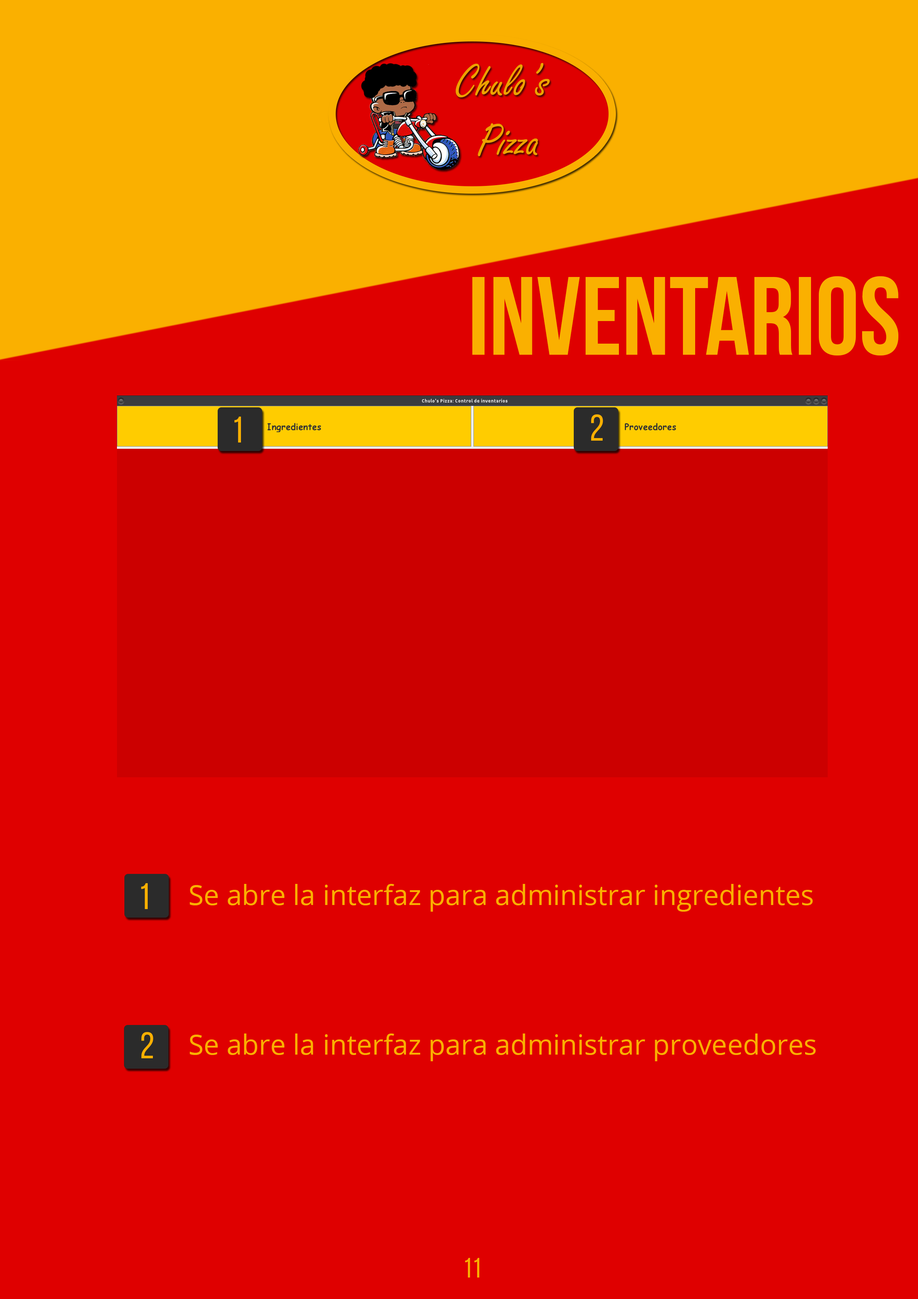
<style>
.page{position:relative;width:918px;height:1299px;background:#df0000}
.page>*{position:absolute;margin:0}
.t1{font:111.1px "BebasNeueBold";color:#fab000}
.t2{font:37px "BebasNeueRegular";color:#fab000}
.t3{font:27.8px "OpenSans";color:#fab000}
.t4{font:27.8px "BebasNeueRegular";color:#fab000}
</style>
<div class="page">
<p class="t1" style="left:472px;top:276px;width:427px;height:79px">Inventarios</p>
<p class="t2" style="left:234px;top:416px;width:7px;height:26px">1</p>
<p class="t2" style="left:591px;top:414px;width:12px;height:27px">2</p>
<p class="t2" style="left:141px;top:883px;width:7px;height:26px">1</p>
<p class="t3" style="left:190px;top:884px;width:623px;height:27px">Se abre la interfaz para administrar ingredientes</p>
<p class="t2" style="left:141px;top:1032px;width:12px;height:26px">2</p>
<p class="t3" style="left:190px;top:1033px;width:626px;height:28px">Se abre la interfaz para administrar proveedores</p>
<p class="t4" style="left:465px;top:1258px;width:14px;height:19px">11</p>
</div>
